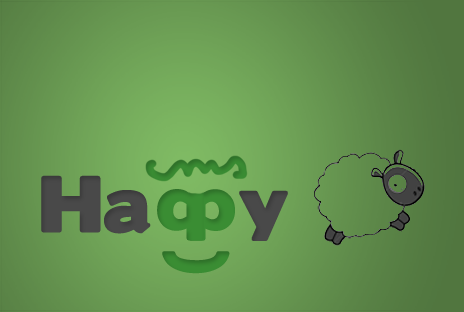
<style>
.page{position:relative;width:464px;height:312px}
.page>*{position:absolute;margin:0}
.t1{font:72px "BorisBlackBloxx";color:#494949}
.t2{font:72px "BorisBlackBloxx";color:#3a8d33}
.t3{font:72px "BorisBlackBloxx";letter-spacing:-0.1em;color:#3a8d33}
</style>
<div class="page">
<p class="t1" style="left:41px;top:175px;width:247px;height:66px">Ha   <span class="t2">p</span>y</p>
<p class="t2" style="left:157px;top:189px;width:47px;height:52px;rotate:180deg">p</p>
<p class="t3" style="left:162px;top:251px;width:68px;height:23px;rotate:-90deg">(</p>
</div>
